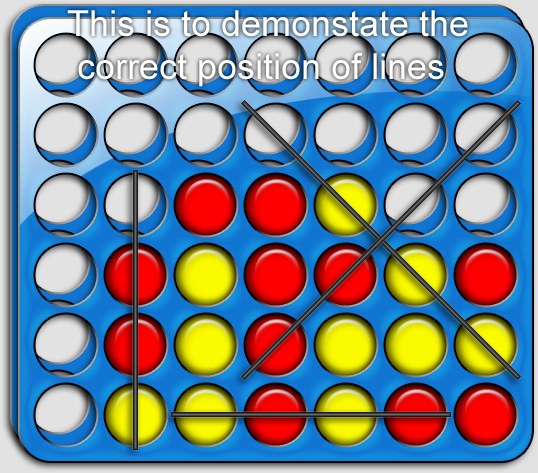
<style>
.page{position:relative;width:538px;height:473px}
.page>*{position:absolute;margin:0}
.t1{font:36px "ArialMT";color:#ffffff}
.t2{font:36px/10px "ArialMT";color:#ffffff}
</style>
<div class="page">
<p class="t1" style="left:67px;top:10px;width:401px;height:77px"><span class="t2">This is to demonstate</span> the<br> correct position of lines</p>
</div>
